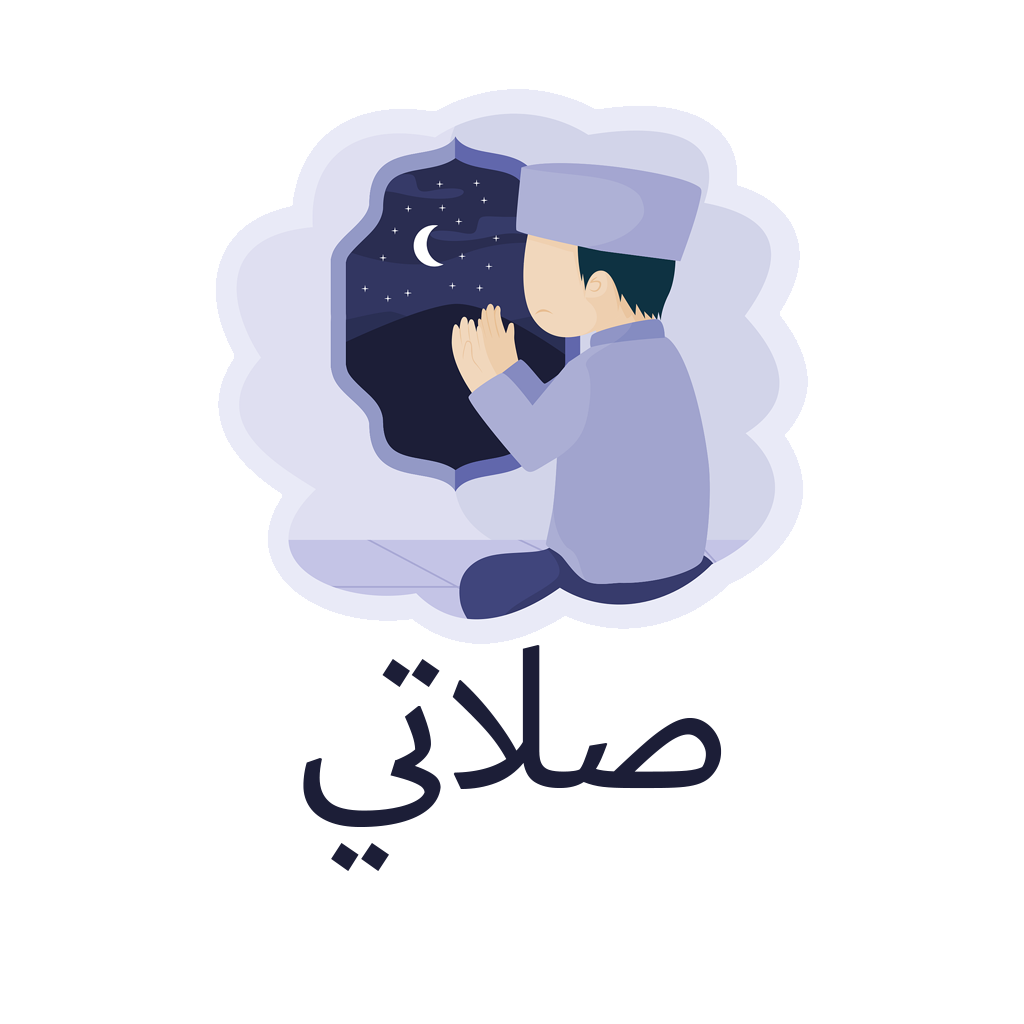
<style>
.page{position:relative;width:1024px;height:1024px;background:#ffffff}
.page>*{position:absolute;margin:0}
.t1{font:209.8px "Dubai-Regular";color:#1c1e37}
</style>
<div class="page">
<p class="t1" style="left:303px;top:645px;width:419px;height:226px">صلاتي</p>
</div>
